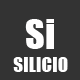
<style>
.page{position:relative;width:80px;height:80px;background:#333333}
.page>*{position:absolute;margin:0}
.t1{font:38.4px "Impact";color:#fffefe}
.t2{font:19.2px "Impact";color:#ffffff}
</style>
<div class="page">
<p class="t1" style="left:25px;top:19px;width:29px;height:30px">Si</p>
<p class="t2" style="left:13px;top:57px;width:55px;height:15px">SILICIO</p>
</div>
